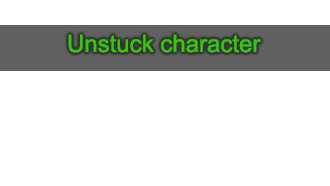
<style>
.page{position:relative;width:330px;height:186px;background:#ffffff}
.page>*{position:absolute;margin:0}
.t1{font:24px "ArialMT";color:#33cc00}
</style>
<div class="page">
<p class="t1" style="left:68px;top:34px;width:193px;height:19px">Unstuck character</p>
</div>
